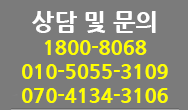
<style>
.page{position:relative;width:188px;height:110px;background:#7b7b7b}
.page>*{position:absolute;margin:0}
.t1{font:20px "NanumGothicExtraBold";color:#ffff00}
.t2{font:24px "NanumGothicExtraBold";color:#ffffff}
</style>
<div class="page">
<p class="t1" style="left:22px;top:11px;width:146px;height:92px;text-align:center"><span class="t2">상담 및 문의<br></span>1800-8068<br>010-5055-3109<br>070-4134-3106</p>
</div>
